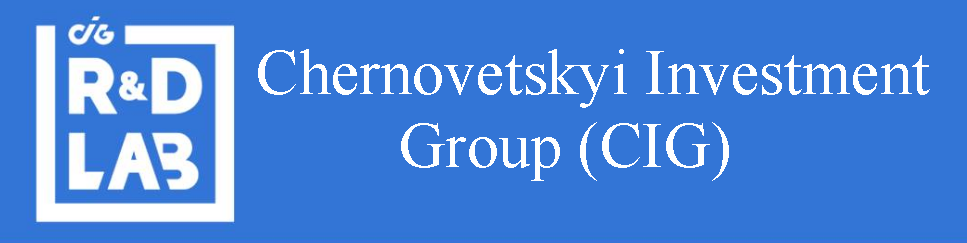
<style>
.page{position:relative;width:967px;height:243px;background:#3375d6}
.page>*{position:absolute;margin:0}
.t1{font:64px "TimesNewRomanPSMT";color:#ffffff}
</style>
<div class="page">
<p class="t1" style="left:258px;top:49px;width:672px;height:59px">Chernovetskyi Investment</p>
<p class="t1" style="left:401px;top:122px;width:328px;height:59px">Group (CIG)</p>
</div>
